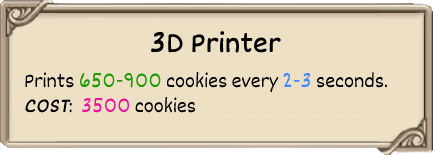
<style>
.page{position:relative;width:433px;height:155px;background:#ede0c4}
.page>*{position:absolute;margin:0}
.t1{font:30px "Dekko";color:#000000;font-weight:bold}
.t2{font:21px "Dekko";color:#000000}
.t3{font:21px "Dekko";color:#1b9902}
.t4{font:21px "Dekko";color:#4086fa}
.t5{font:21px "Dekko";color:#000000;font-weight:bold;font-style:italic}
.t6{font:21px "Dekko";color:#f0129a}
</style>
<div class="page">
<p class="t1" style="left:151px;top:31px;width:130px;height:22px">3D Printer</p>
<p class="t2" style="left:25px;top:71px;width:362px;height:42px">Prints <span class="t3">650-900 </span>cookies every <span class="t4">2-3 </span>seconds.<br><span class="t5">COST</span>:  <span class="t6">3500 </span>cookies</p>
</div>
